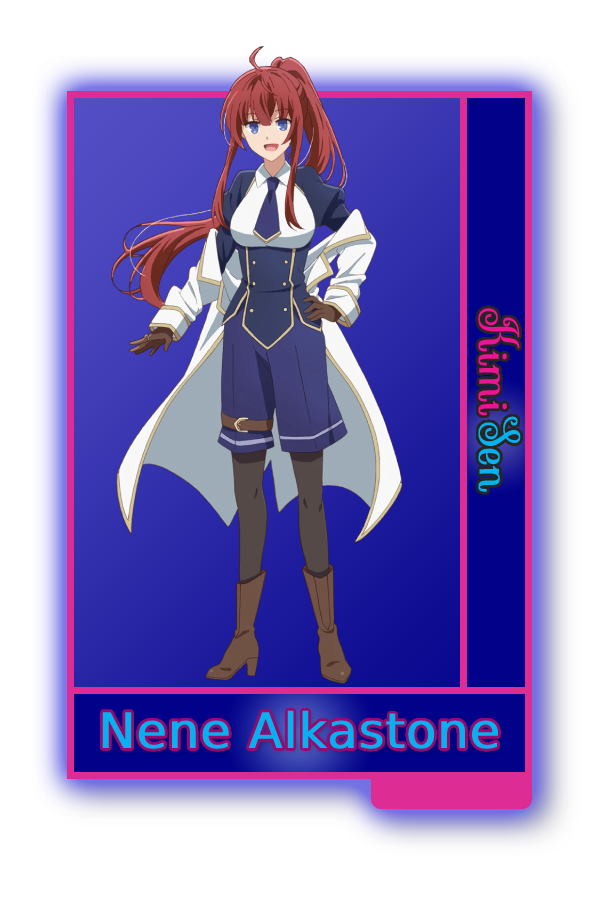
<style>
.page{position:relative;width:600px;height:900px;background:#ffffff}
.page>*{position:absolute;margin:0}
.t1{font:48.8px "Sevillana-Regular";color:#ee1294;font-weight:bold}
.t2{font:48.8px "Sevillana-Regular";color:#07b0ef;font-weight:bold}
.t3{font:49px "CoolveticaRg-Regular";color:#07b0ef;font-weight:bold}
</style>
<div class="page">
<p class="t1" style="left:478px;top:308px;width:43px;height:184px;rotate:90deg">Kimi<span class="t2">Sen</span></p>
<p class="t3" style="left:102px;top:710px;width:397px;height:39px">Nene Alkastone</p>
</div>
